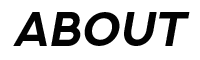
<style>
.page{position:relative;width:200px;height:60px;background:#ffffff}
.page>*{position:absolute;margin:0}
.t1{font:48px "NEXTART-Bold";color:#020202;font-style:italic}
</style>
<div class="page">
<p class="t1" style="left:13px;top:12px;width:177px;height:34px">ABOUT</p>
</div>
